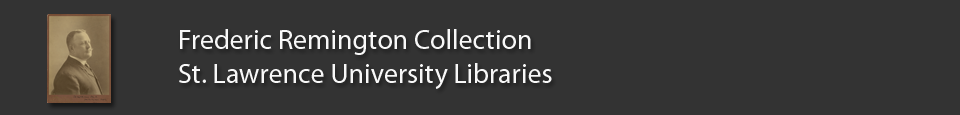
<style>
.page{position:relative;width:960px;height:115px;background:#333333}
.page>*{position:absolute;margin:0}
.t1{font:28px "MyriadPro-Regular";color:#f8f8f8}
</style>
<div class="page">
<p class="t1" style="left:179px;top:29px;width:373px;height:60px">Frederic Remington Collection<br>St. Lawrence University Libraries</p>
</div>
